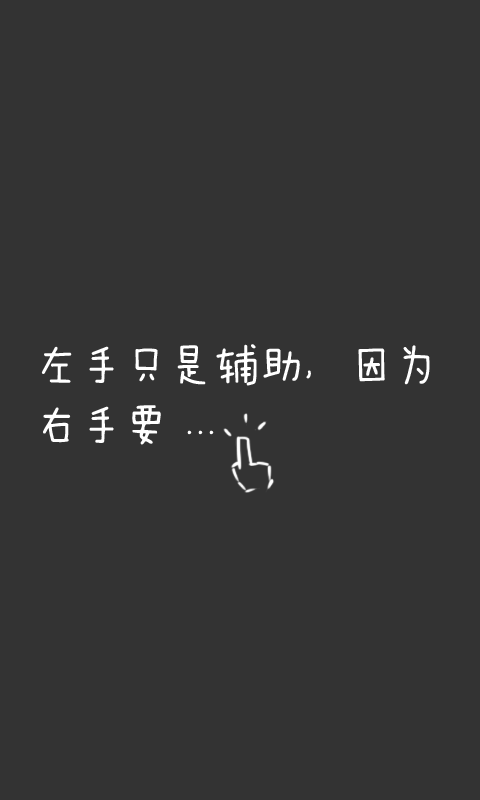
<style>
.page{position:relative;width:480px;height:800px;background:#333333}
.page>*{position:absolute;margin:0}
.t1{font:45px/60px "FZMWJW--GB1-0";color:#ffffff}
</style>
<div class="page">
<p class="t1" style="left:41px;top:344px;width:389px;height:101px">左手只是辅助，因为<br>右手要 ...</p>
</div>
